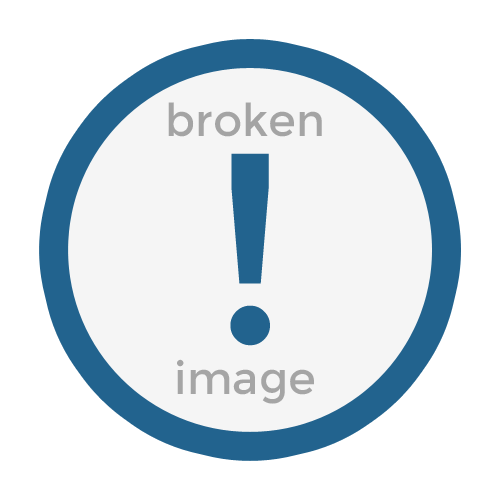
<style>
.page{position:relative;width:500px;height:500px;background:#ffffff}
.page>*{position:absolute;margin:0}
.t1{font:45px "Montserrat-Regular";color:#a4a4a4}
.t2{font:264px "Montserrat-Regular";color:#22638e}
.t3{font:45px "Montserrat-Regular";color:#a5a5a5}
</style>
<div class="page">
<p class="t1" style="left:168px;top:102px;width:154px;height:35px">broken</p>
<p class="t2" style="left:230px;top:153px;width:40px;height:193px">!</p>
<p class="t3" style="left:177px;top:359px;width:137px;height:45px">image</p>
</div>
